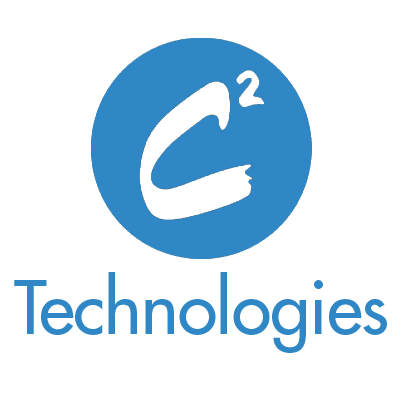
<style>
.page{position:relative;width:408px;height:407px;background:#ffffff}
.page>*{position:absolute;margin:0}
.t1{font:72px "Futura";letter-spacing:-0.01em;color:#3087c5}
</style>
<div class="page">
<p class="t1" style="left:14px;top:272px;width:373px;height:81px">Technologies</p>
</div>
